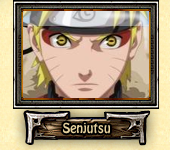
<style>
.page{position:relative;width:170px;height:150px}
.page>*{position:absolute;margin:0}
.t1{font:12px "HoboStd";color:#e3cf9c}
</style>
<div class="page">
<p class="t1" style="left:63px;top:122px;width:47px;height:12px">Senjutsu</p>
</div>
